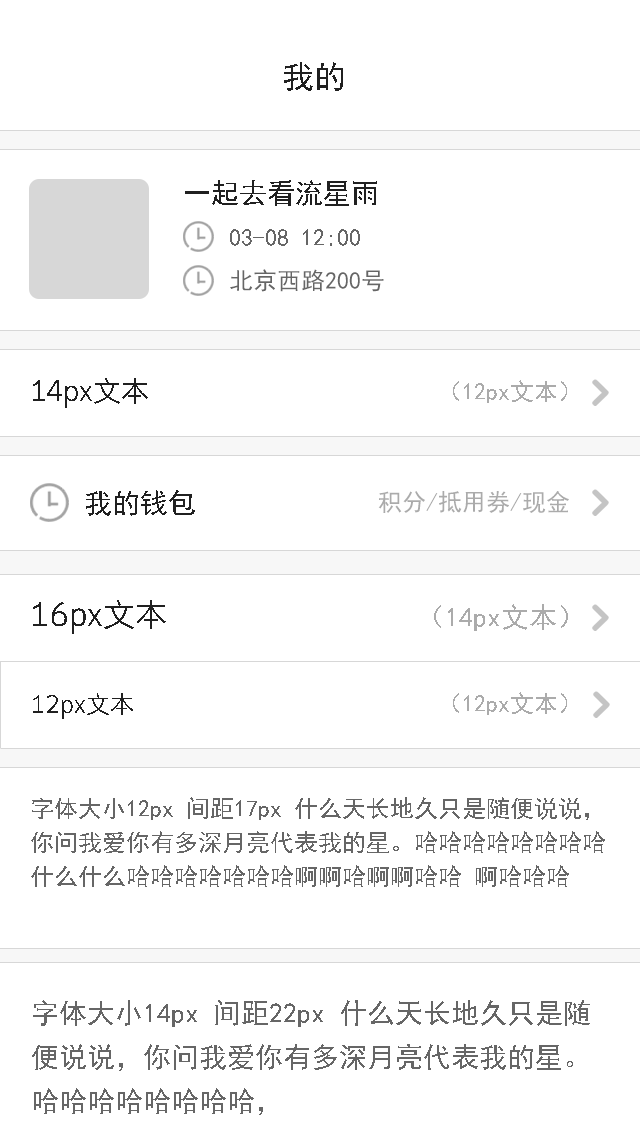
<style>
.page{position:relative;width:640px;height:1136px;background:#ffffff}
.page>*{position:absolute;margin:0}
.t1{font:32px "SimHei";color:#202020}
.t2{font:28px "SimHei";color:#202020}
.t3{font:24px "SimHei";color:#666666}
.t4{font:28px "STHeitiSC-Light";color:#202020}
.t5{font:24px "SimHei";color:#ababab}
.t6{font:32px "STHeitiSC-Light";color:#202020}
.t7{font:28px "SimHei";color:#ababab}
.t8{font:24px "STHeitiSC-Light";color:#202020}
.t9{font:24px/34px "SimHei";color:#666666}
.t10{font:28px/44px "SimHei";color:#666666}
.t11{font:28px/34px "SimHei";color:#ababab}
</style>
<div class="page">
<p class="t1" style="left:284px;top:62px;width:59px;height:29px">我的</p>
<p class="t2" style="left:185px;top:180px;width:192px;height:26px">一起去看流星雨</p>
<p class="t3" style="left:230px;top:229px;width:130px;height:17px">03-08 12:00</p>
<p class="t3" style="left:230px;top:269px;width:154px;height:23px">北京西路200号</p>
<p class="t4" style="left:33px;top:378px;width:115px;height:30px">14px文本</p>
<p class="t5" style="left:453px;top:380px;width:114px;height:23px">（12px文本）</p>
<p class="t2" style="left:86px;top:490px;width:109px;height:26px">我的钱包</p>
<p class="t5" style="left:378px;top:491px;width:191px;height:22px">积分/抵用券/现金</p>
<p class="t6" style="left:33px;top:600px;width:133px;height:34px">16px文本</p>
<p class="t7" style="left:434px;top:604px;width:134px;height:27px">（14px文本）</p>
<p class="t8" style="left:33px;top:693px;width:100px;height:26px">12px文本</p>
<p class="t5" style="left:453px;top:692px;width:114px;height:23px">（12px文本）</p>
<p class="t9" style="left:31px;top:797px;width:574px;height:90px">字体大小12px 间距17px 什么天长地久只是随便说说，<br>你问我爱你有多深月亮代表我的星。哈哈哈哈哈哈哈哈<br>什么什么哈哈哈哈哈哈哈啊啊哈啊啊哈哈 啊哈哈哈</p>
<p class="t10" style="left:32px;top:1000px;width:558px;height:115px">字体大小14px 间距22px 什么天长地久只是随便说说，你问我爱你有多深月亮代表我的星。哈哈哈哈哈哈哈哈，<br><span class="t11">什么什么哈哈哈哈哈哈哈啊啊哈啊啊哈哈 啊哈哈</span></p>
</div>
